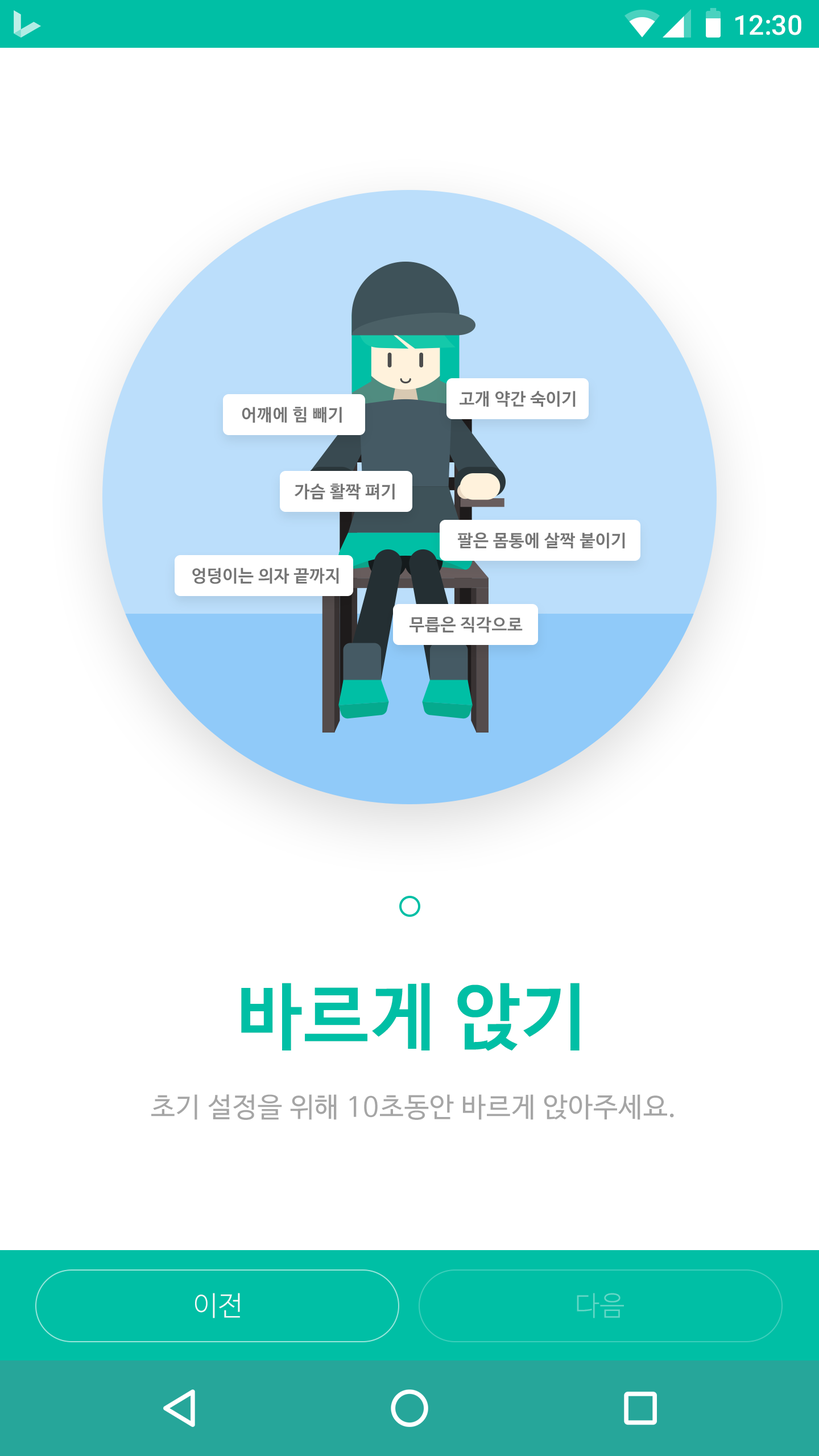
<style>
.page{position:relative;width:819px;height:1456px;background:#ffffff}
.page>*{position:absolute;margin:0}
.t1{font:27.3px "Roboto-Medium";color:#ffffff}
.t2{font:17.1px "NanumBarunGothicBold";letter-spacing:0.025em;color:#757575}
.t3{font:72.8px "NanumBarunGothicBold";letter-spacing:0.025em;color:#00bfa5}
.t4{font:27.3px "NanumBarunGothic";letter-spacing:0.025em;color:#a5a5a5}
.t5{font:27.3px "NanumBarunGothicLight";letter-spacing:0.025em;color:#fafafa}
.t6{font:27.3px "NanumBarunGothicLight";letter-spacing:0.025em;color:#64d7c7}
</style>
<div class="page">
<p class="t1" style="left:735px;top:15px;width:66px;height:20px">12:30</p>
<p class="t2" style="left:460px;top:391px;width:116px;height:16px">고개 약간 숙이기</p>
<p class="t2" style="left:242px;top:407px;width:100px;height:16px">어깨에 힘 빼기</p>
<p class="t2" style="left:295px;top:483px;width:100px;height:17px">가슴 활짝 펴기</p>
<p class="t2" style="left:458px;top:532px;width:167px;height:17px">팔은 몸통에 살짝 붙이기</p>
<p class="t2" style="left:192px;top:568px;width:147px;height:16px">엉덩이는 의자 끝까지</p>
<p class="t2" style="left:409px;top:617px;width:114px;height:16px">무릅은 직각으로</p>
<p class="t3" style="left:241px;top:983px;width:339px;height:68px">바르게 앉기</p>
<p class="t4" style="left:151px;top:1094px;width:523px;height:26px">초기 설정을 위해 10초동안 바르게 앉아주세요.</p>
<p class="t5" style="left:195px;top:1293px;width:45px;height:25px">이전</p>
<p class="t6" style="left:577px;top:1293px;width:47px;height:25px">다음</p>
</div>
